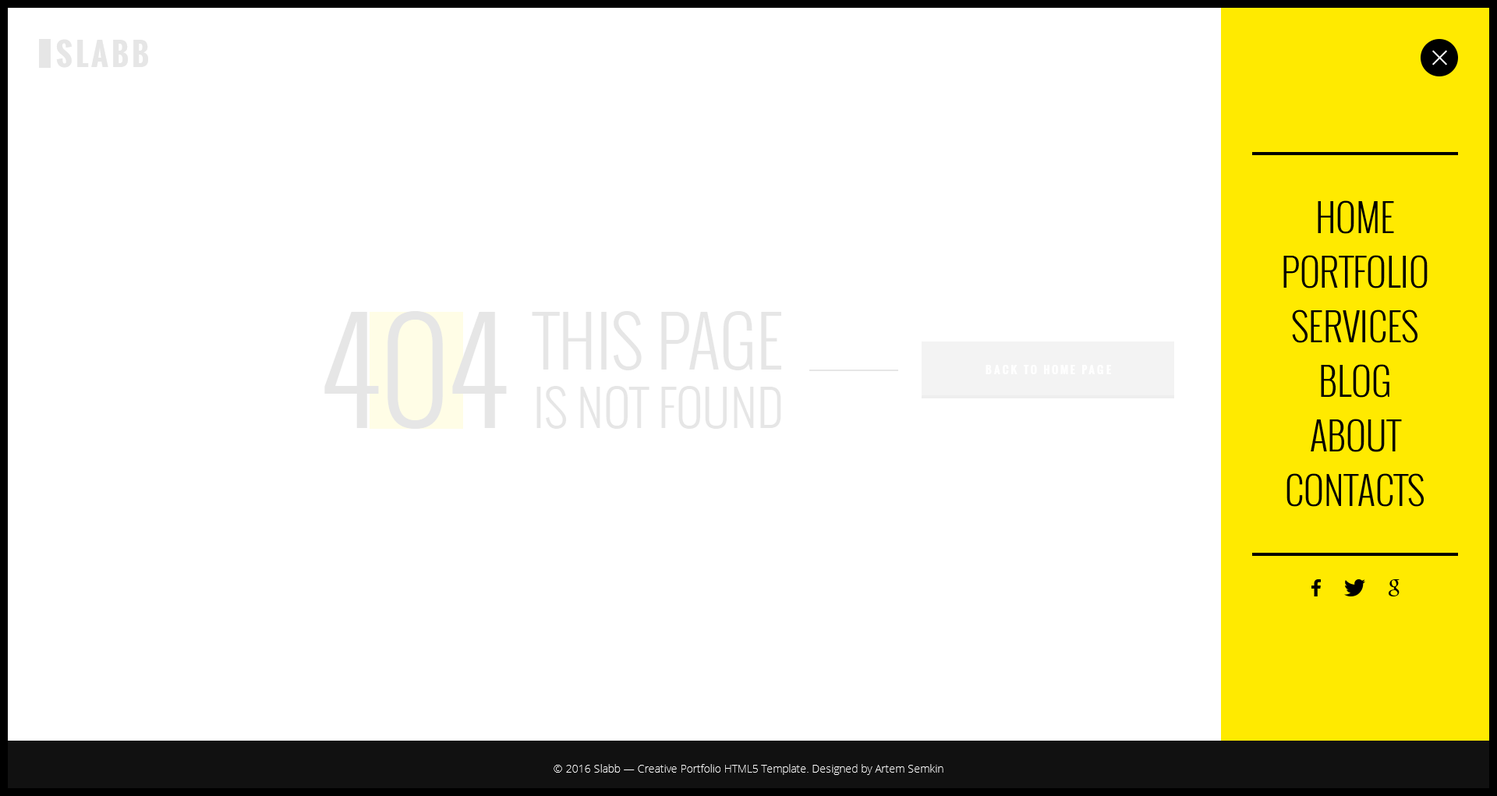
<style>
.page{position:relative;width:1497px;height:796px;background:#ffffff}
.page>*{position:absolute;margin:0}
.t1{font:37.4px "Oswald-Light";color:#000000;text-transform:uppercase}
.t2{font:138px "Oswald-Light";color:#e6e6e6;text-transform:uppercase}
.t3{font:68.6px "Oswald-Light";color:#e6e6e6;text-transform:uppercase}
.t4{font:10.9px "Oswald-Bold";letter-spacing:0.2em;color:#ffffff;text-transform:uppercase}
.t5{font:49.9px "Oswald-Light";color:#e6e6e6;text-transform:uppercase}
</style>
<div class="page">
<p class="t1" style="left:1318px;top:200px;width:77px;height:34px">Home</p>
<p class="t1" style="left:1284px;top:255px;width:144px;height:34px">Portfolio</p>
<p class="t2" style="left:324px;top:311px;width:183px;height:118px">404</p>
<p class="t3" style="left:532px;top:311px;width:249px;height:59px">This page</p>
<p class="t1" style="left:1292px;top:310px;width:126px;height:33px">Services</p>
<p class="t4" style="left:986px;top:365px;width:125px;height:9px">Back to home page</p>
<p class="t1" style="left:1321px;top:364px;width:69px;height:34px">Blog</p>
<p class="t5" style="left:537px;top:386px;width:244px;height:43px">Is not found</p>
<p class="t1" style="left:1311px;top:419px;width:91px;height:33px">About</p>
<p class="t1" style="left:1287px;top:473px;width:137px;height:34px">Contacts</p>
</div>
